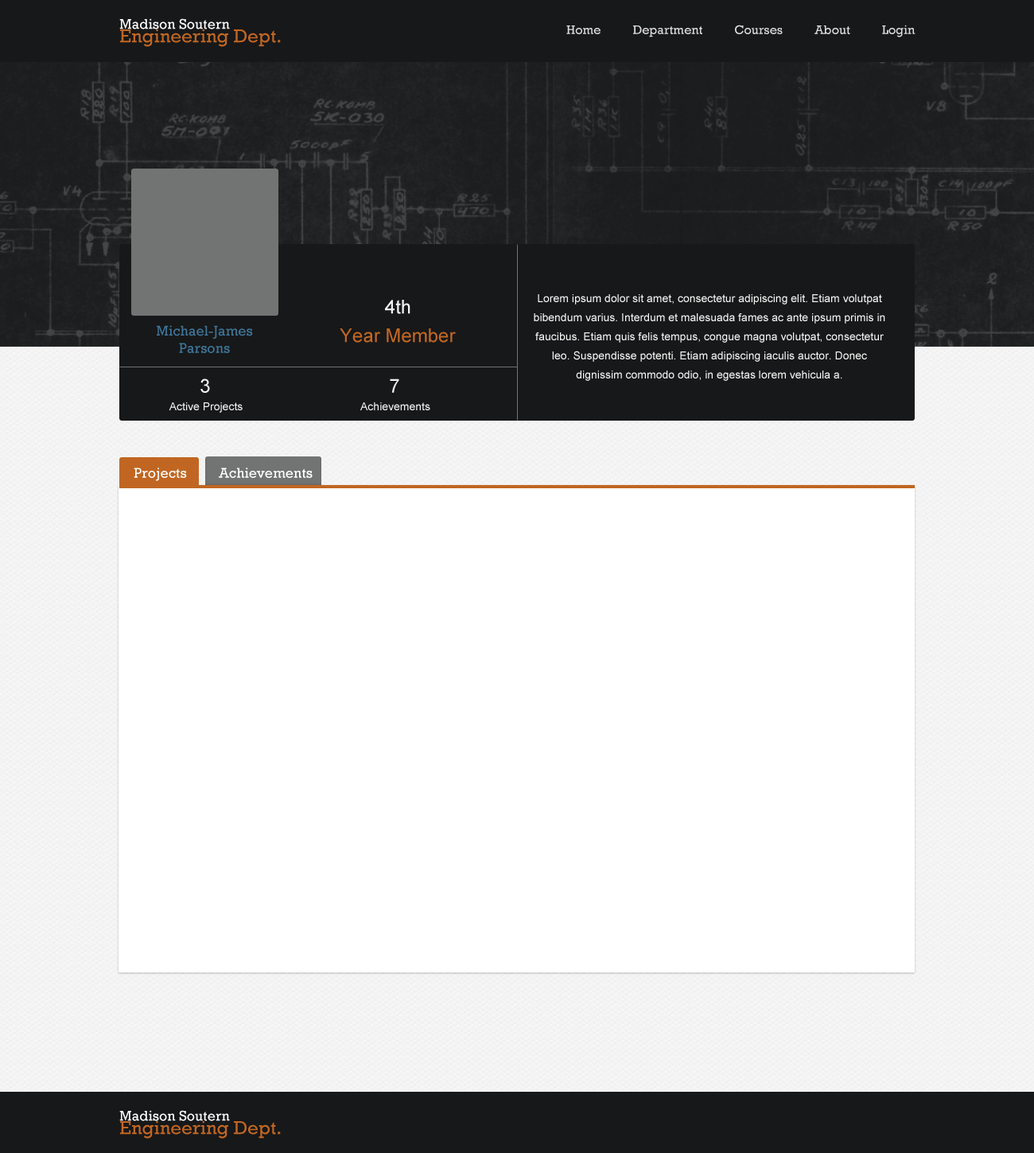
<style>
.page{position:relative;width:1034px;height:1153px;background:#ffffff}
.page>*{position:absolute;margin:0}
.t1{font:14.3px "Rockwell";color:#ffffff}
.t2{font:19.1px "Rockwell";color:#c16622}
.t3{font:12.7px "Rockwell";color:#dddddd}
.t4{font:19.1px "ArialMT";color:#f4f4f4}
.t5{font:11.1px/19.1px "ArialMT";color:#f4f4f4}
.t6{font:14.3px "Rockwell";color:#3e769a}
.t7{font:19.1px "ArialMT";color:#c16622}
.t8{font:11.1px "ArialMT";color:#f4f4f4}
</style>
<div class="page">
<p class="t1" style="left:119px;top:18px;width:111px;height:11px">Madison Soutern</p>
<p class="t2" style="left:120px;top:29px;width:161px;height:18px">Engineering Dept.</p>
<p class="t3" style="left:566px;top:25px;width:349px;height:12px">Home          Department          Courses          About          Login</p>
<p class="t4" style="left:385px;top:300px;width:25px;height:14px">4th</p>
<p class="t5" style="left:534px;top:294px;width:351px;height:87px;text-align:center">Lorem ipsum dolor sit amet, consectetur adipiscing elit. Etiam volutpat bibendum varius. Interdum et malesuada fames ac ante ipsum primis in faucibus. Etiam quis felis tempus, congue magna volutpat, consectetur leo. Suspendisse potenti. Etiam adipiscing iaculis auctor. Donec<br>dignissim commodo odio, in egestas lorem vehicula a.</p>
<p class="t6" style="left:157px;top:325px;width:96px;height:28px;text-align:center">Michael-James<br>Parsons</p>
<p class="t7" style="left:340px;top:328px;width:116px;height:15px">Year Member</p>
<p class="t4" style="left:200px;top:379px;width:10px;height:14px">3</p>
<p class="t4" style="left:390px;top:379px;width:9px;height:14px">7</p>
<p class="t8" style="left:169px;top:402px;width:74px;height:11px">Active Projects</p>
<p class="t8" style="left:360px;top:402px;width:70px;height:8px">Achievements</p>
<p class="t1" style="left:134px;top:468px;width:179px;height:13px">Projects         Achievements</p>
<p class="t1" style="left:119px;top:1110px;width:111px;height:11px">Madison Soutern</p>
<p class="t2" style="left:120px;top:1121px;width:161px;height:18px">Engineering Dept.</p>
</div>
